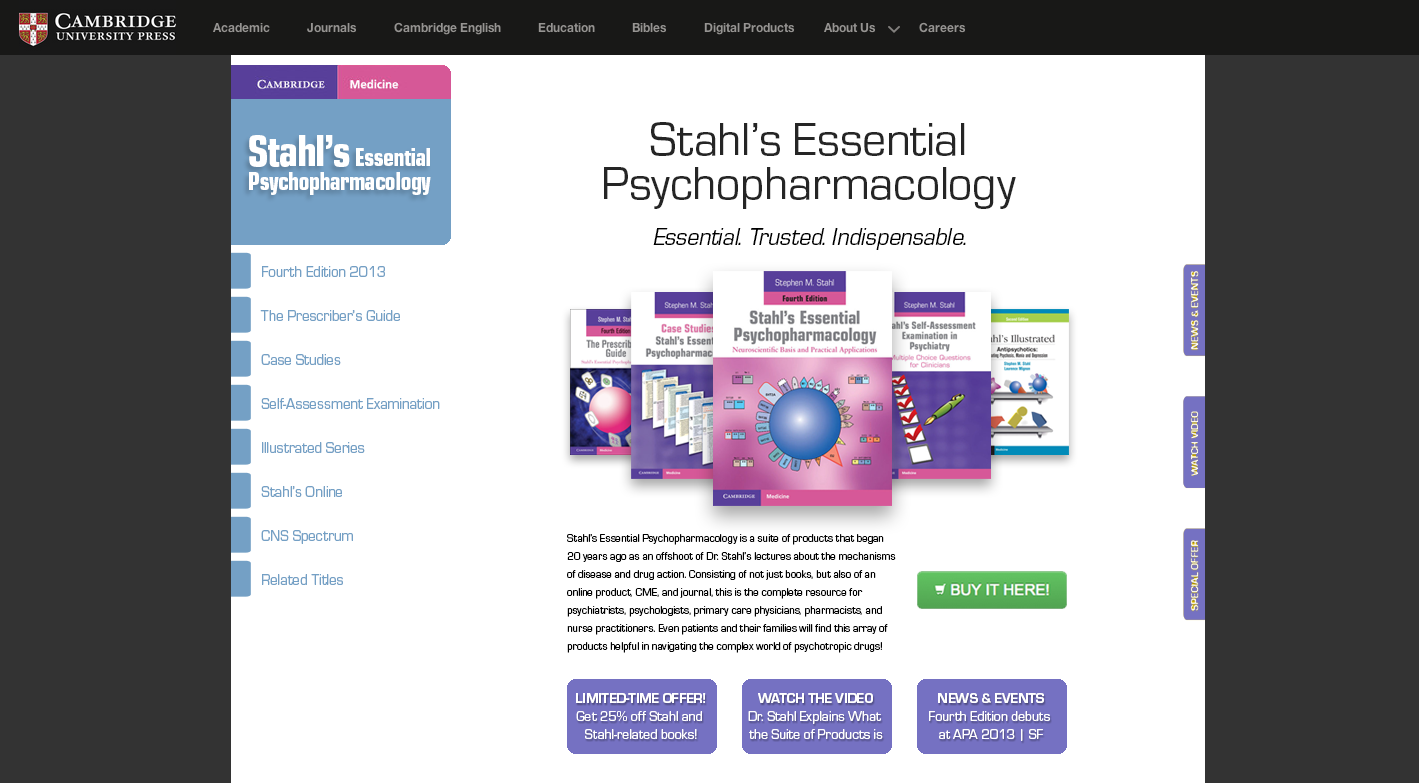
<style>
.page{position:relative;width:1419px;height:783px;background:#ffffff}
.page>*{position:absolute;margin:0}
.t1{font:48px/44px "Eurostile-Reg";letter-spacing:-0.01em;color:#252525}
.t2{font:24px "Eurostile-RegObl";letter-spacing:-0.01em;color:#000000}
.t3{font:15px/44px "Eurostile-Reg";letter-spacing:-0.01em;color:#74a0c5}
.t4{font:11px/18px "Eurostile-Reg";letter-spacing:-0.01em;color:#000000}
.t5{font:14px/18px "Eurostile-Reg";letter-spacing:-0.01em;color:#ffffff}
.t6{font:14px/18px "Eurostile-Bol";letter-spacing:-0.01em;color:#ffffff}
</style>
<div class="page">
<p class="t1" style="left:604px;top:122px;width:412px;height:87px;text-align:center">Stahl’s Essential<br>Psychopharmacology</p>
<p class="t2" style="left:653px;top:228px;width:313px;height:22px">Essential. Trusted. Indispensable.</p>
<p class="t3" style="left:260px;top:266px;width:180px;height:319px">Fourth Edition 2013<br>The Prescriber’s Guide<br>Case Studies<br>Self-Assessment Examination<br>Illustrated Series<br>Stahl’s Online<br>CNS Spectrum<br>Related Titles</p>
<p class="t4" style="left:567px;top:534px;width:329px;height:119px">Stahl’s Essential Psychopharmacology is a suite of products that began 20 years ago as an offshoot of Dr. Stahl’s lectures about the mechanisms of disease and drug action. Consisting of not just books, but also of an online product, CME, and journal, this is the complete resource for psychiatrists, psychologists, primary care physicians, pharmacists, and nurse practitioners. Even patients and their families will find this array of products helpful in navigating the complex world of psychotropic drugs!</p>
<p class="t5" style="left:576px;top:693px;width:130px;height:46px;text-align:center"><span class="t6">LIMITED-TIME OFFER!<br></span>Get 25% off Stahl and <br>Stahl-related books!</p>
<p class="t5" style="left:748px;top:693px;width:135px;height:46px;text-align:center"><span class="t6">WATCH THE VIDEO<br></span>Dr. Stahl Explains What <br>the Suite of Products is</p>
<p class="t5" style="left:929px;top:693px;width:121px;height:48px;text-align:center"><span class="t6">NEWS &amp; EVENTS<br></span>Fourth Edition debuts <br>at APA 2013 | SF</p>
</div>
